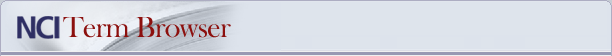
<style>
.page{position:relative;width:612px;height:56px;background:#dee4ec}
.page>*{position:absolute;margin:0}
.t1{font:30px "BaskOldFace";letter-spacing:-0.023em;color:#8c100e}
</style>
<div class="page">
<p class="t1" style="left:63px;top:17px;width:168px;height:21px">Term Browser</p>
</div>
